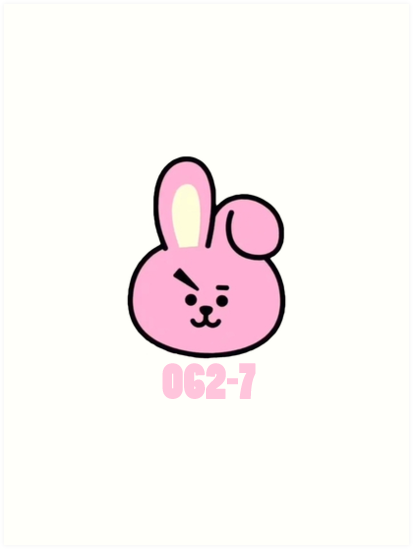
<style>
.page{position:relative;width:413px;height:549px;background:#fffffa}
.page>*{position:absolute;margin:0}
.t1{font:47.9px "PoplarStd";color:#ffc5dc}
</style>
<div class="page">
<p class="t1" style="left:162px;top:363px;width:94px;height:36px">062-7</p>
</div>
